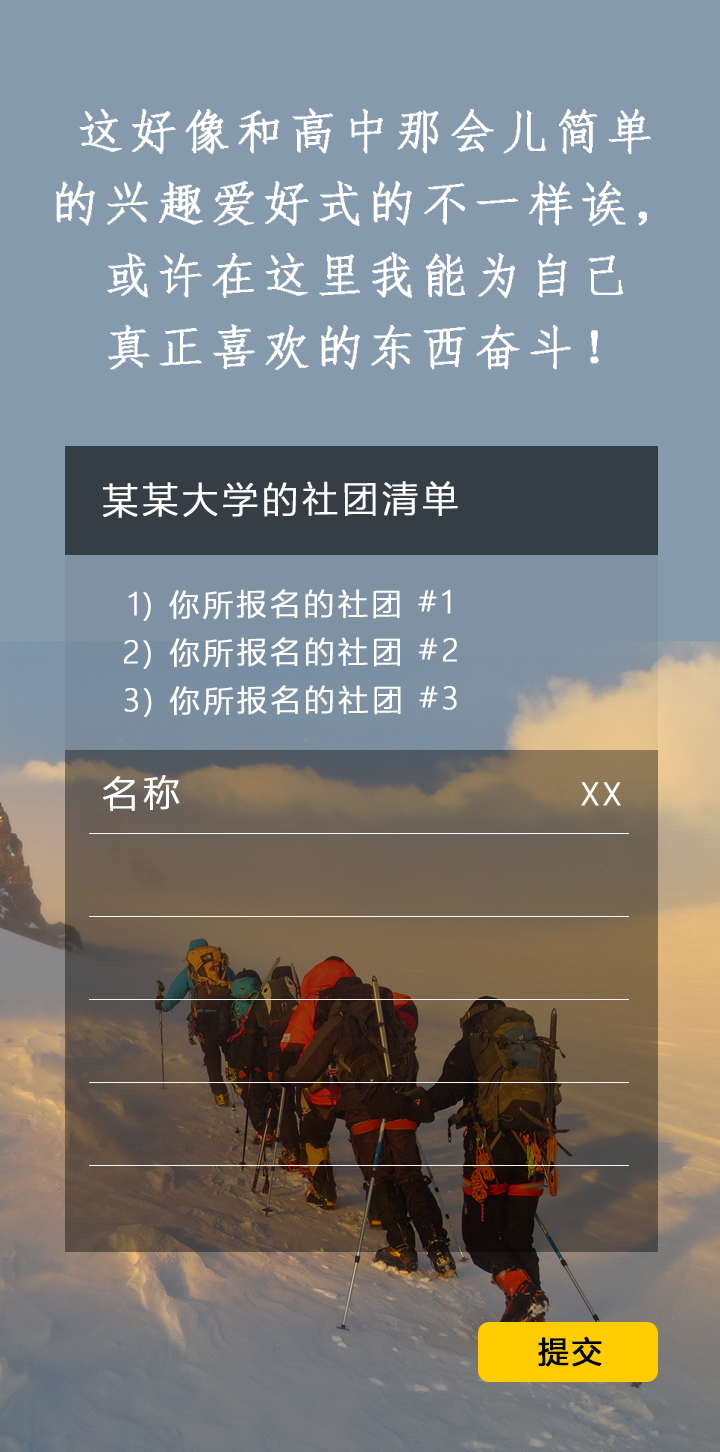
<style>
.page{position:relative;width:720px;height:1452px;background:#859aad}
.page>*{position:absolute;margin:0}
.t1{font:48px/72px "·ÂËÎ";letter-spacing:0.1em;color:#ffffff;font-weight:bold}
.t2{font:36px "MicrosoftYaHeiLight";letter-spacing:0.1em;color:#ffffff;font-weight:bold}
.t3{font:30px/48px "MicrosoftYaHeiLight";letter-spacing:0.1em;color:#ffffff;font-weight:bold}
.t4{font:36.3px "MicrosoftYaHeiLight";letter-spacing:0.1em;color:#ffffff;font-weight:bold}
.t5{font:30px "MicrosoftYaHeiLight";letter-spacing:0.1em;color:#ffffff;font-weight:bold}
.t6{font:30px "MicrosoftYaHei";letter-spacing:0.1em;color:#000000;font-weight:bold}
</style>
<div class="page">
<p class="t1" style="left:56px;top:108px;width:595px;height:262px;text-align:center">这好像和高中那会儿简单<br>的兴趣爱好式的不一样诶，<br>或许在这里我能为自己<br>真正喜欢的东西奋斗！</p>
<p class="t2" style="left:103px;top:481px;width:355px;height:37px">某某大学的社团清单</p>
<p class="t3" style="left:124px;top:589px;width:333px;height:128px;text-align:center">1) 你所报名的社团 #1<br>2) 你所报名的社团 #2<br>3) 你所报名的社团 #3</p>
<p class="t4" style="left:103px;top:775px;width:77px;height:36px">名称</p>
<p class="t5" style="left:581px;top:782px;width:40px;height:24px">XX</p>
<p class="t6" style="left:538px;top:1336px;width:64px;height:31px">提交</p>
</div>
